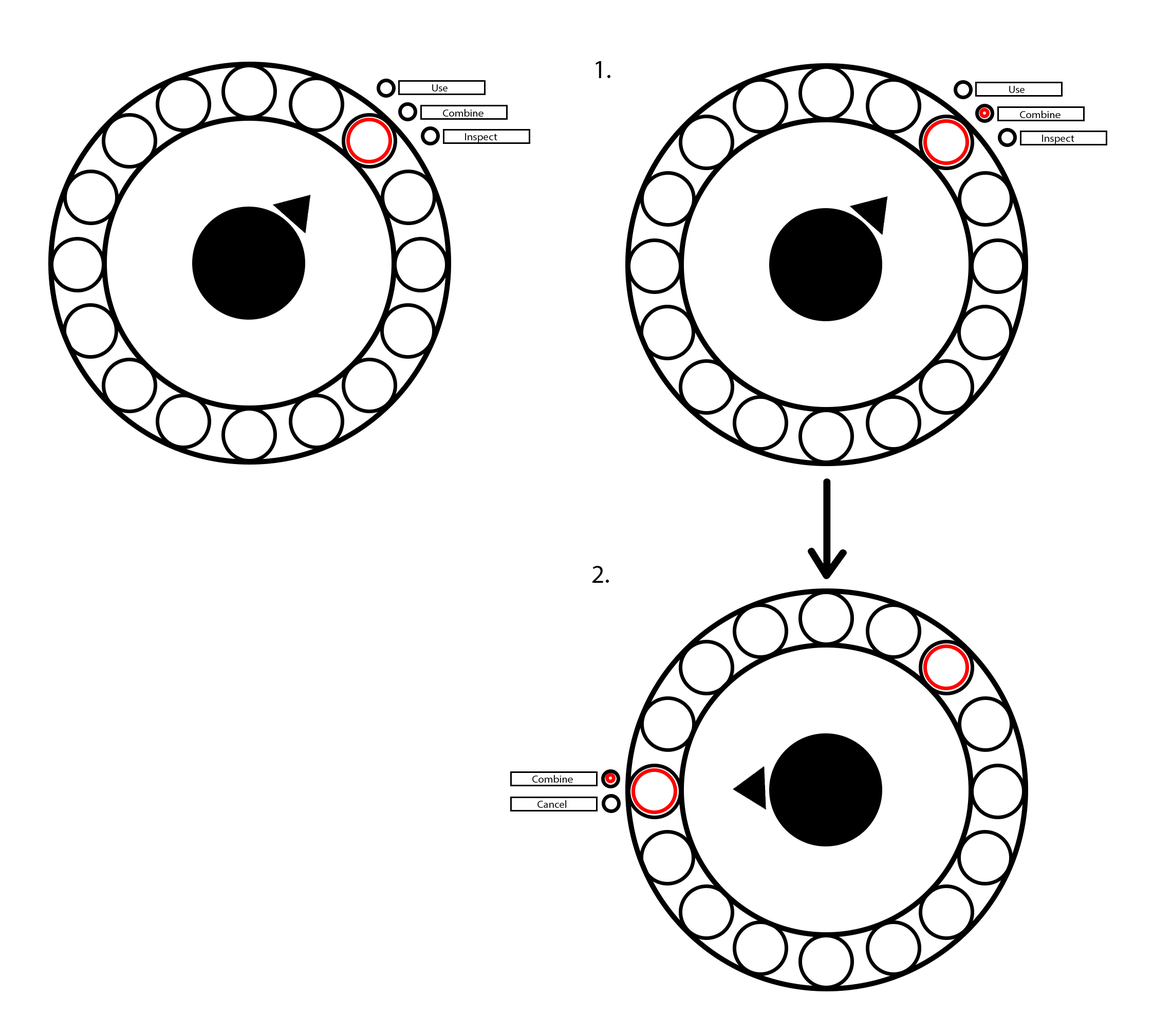
<style>
.page{position:relative;width:1153px;height:1034px;background:#ffffff}
.page>*{position:absolute;margin:0}
.t1{font:25.7px "MyriadPro-Regular";color:#000000}
.t2{font:10.7px "MyriadPro-Regular";color:#000000}
</style>
<div class="page">
<p class="t1" style="left:596px;top:61px;width:15px;height:17px">1.</p>
<p class="t2" style="left:432px;top:84px;width:16px;height:7px">Use</p>
<p class="t2" style="left:1009px;top:86px;width:16px;height:7px">Use</p>
<p class="t2" style="left:443px;top:109px;width:41px;height:8px">Combine</p>
<p class="t2" style="left:1020px;top:110px;width:41px;height:8px">Combine</p>
<p class="t2" style="left:465px;top:133px;width:32px;height:9px">Inspect</p>
<p class="t2" style="left:1042px;top:135px;width:33px;height:9px">Inspect</p>
<p class="t1" style="left:593px;top:566px;width:16px;height:17px">2.</p>
<p class="t2" style="left:532px;top:775px;width:41px;height:8px">Combine</p>
<p class="t2" style="left:538px;top:800px;width:29px;height:8px">Cancel</p>
</div>
